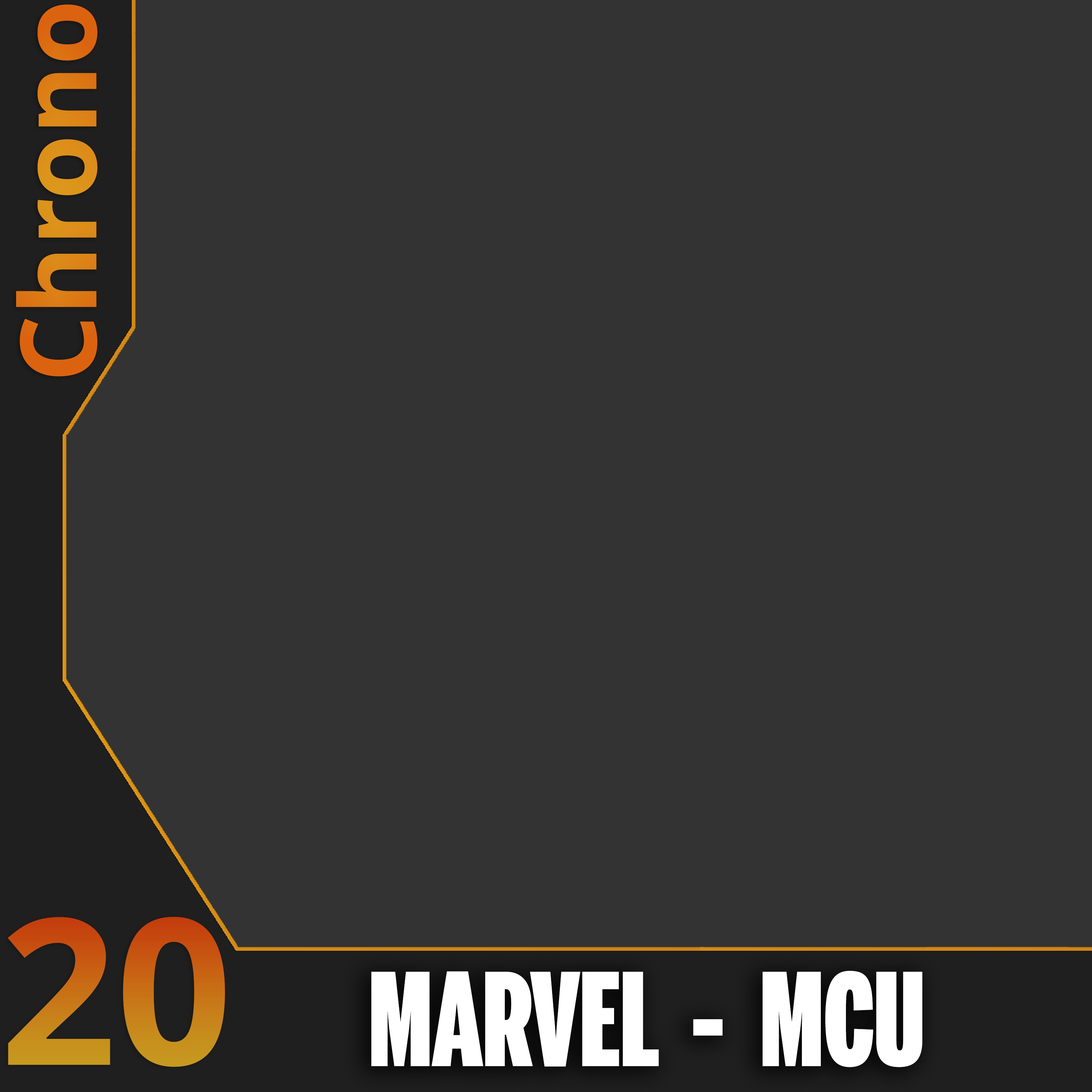
<style>
.page{position:relative;width:1092px;height:1092px;background:#333333}
.page>*{position:absolute;margin:0}
.t1{font:105.6px "OpenSans-Bold";color:#cc7b19}
.t2{font:203.8px "OpenSans-Bold"}
.t3{font:127.4px "BentonSansExtraComp-Black";color:#ffffff}
</style>
<div class="page">
<p class="t1" style="left:16px;top:4px;width:82px;height:372px;rotate:-90deg">Chrono</p>
<p class="t2" style="left:8px;top:917px;width:217px;height:150px">20</p>
<p class="t3" style="left:371px;top:971px;width:551px;height:96px">MARVEL  -  MCU</p>
</div>
